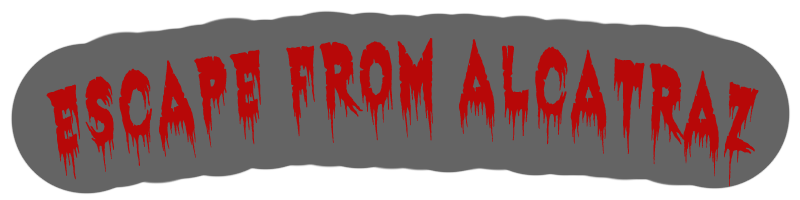
<style>
.page{position:relative;width:800px;height:200px;background:#646464}
.page>*{position:absolute;margin:0}
.t1{font:89.3px "ExquisiteCorpse";letter-spacing:0.1em;color:#b70808;scale:0.61 1}
</style>
<div class="page">
<p class="t1" style="left:46px;top:38px;width:713px;height:149px">Escape from Alcatraz</p>
</div>
